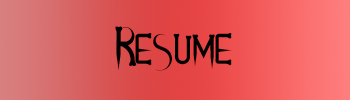
<style>
.page{position:relative;width:350px;height:100px}
.page>*{position:absolute;margin:0}
.t1{font:50px "DemonsandDarlings";color:#000000}
</style>
<div class="page">
<p class="t1" style="left:115px;top:26px;width:117px;height:45px">Resume</p>
</div>
